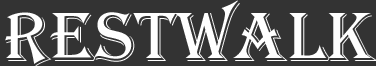
<style>
.page{position:relative;width:376px;height:66px;background:#333333}
.page>*{position:absolute;margin:0}
.t1{font:72px "Algerian";color:#ffffff}
</style>
<div class="page">
<p class="t1" style="left:5px;top:0px;width:373px;height:66px">RESTWALK</p>
</div>
